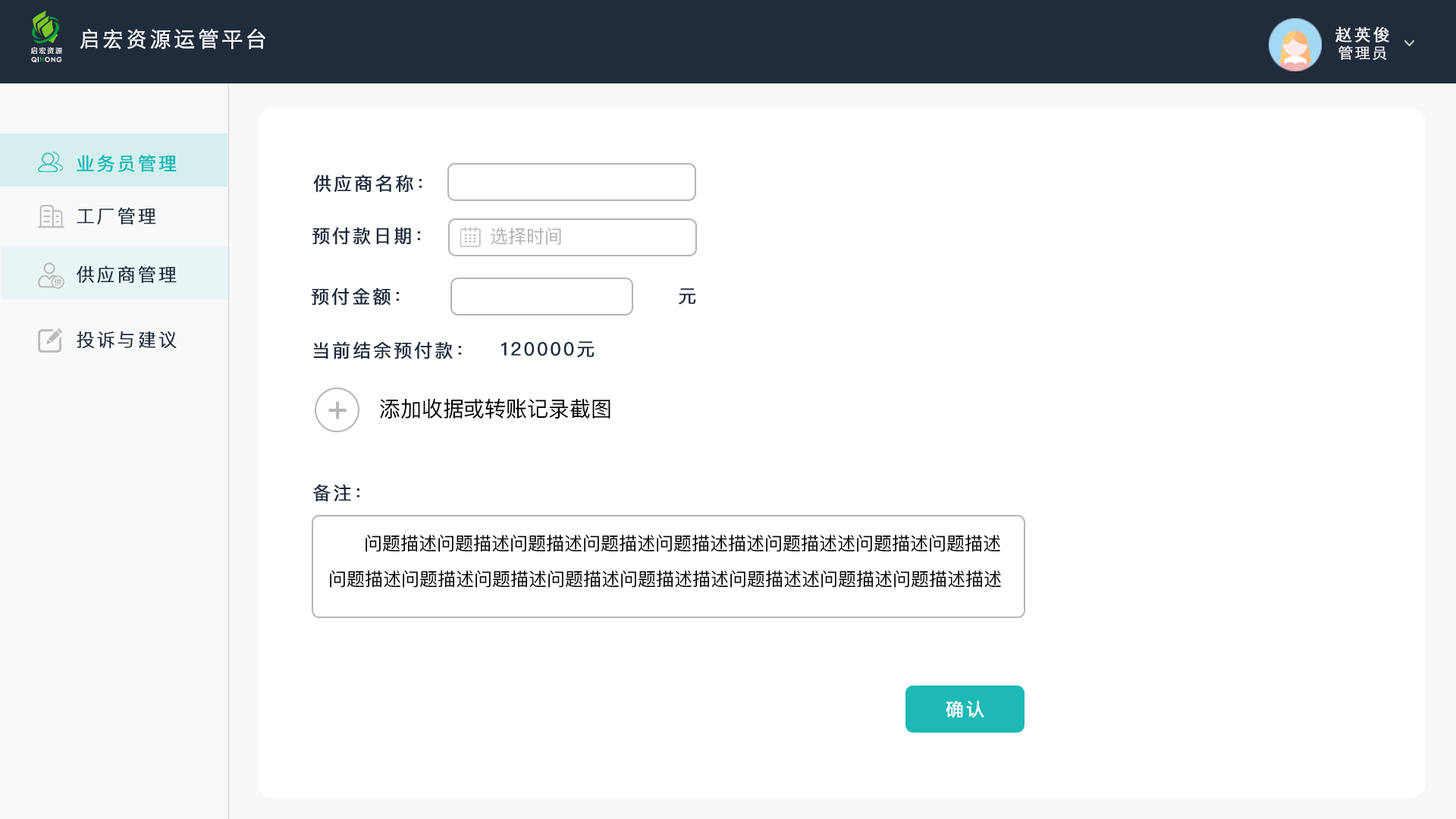
<style>
.page{position:relative;width:1456px;height:819px;background:#ffffff}
.page>*{position:absolute;margin:0}
.t1{font:21.2px "STHeitiSC-Light";letter-spacing:0.1em;color:#ffffff;font-weight:bold}
.t2{font:16.7px "STHeitiSC-Light";letter-spacing:0.1em;color:#ffffff;font-weight:bold}
.t3{font:7px "FZLTZHK--GBK1-0";letter-spacing:0.18em;color:#ffffff}
.t4{font:15.2px "STHeitiSC-Light";letter-spacing:0.1em;color:#ffffff;font-weight:bold}
.t5{font:6.3px "CenturyGothic";letter-spacing:0.1em;color:#ffffff;font-weight:bold}
.t6{font:18.2px "PingFangSC-Regular";letter-spacing:0.1em;color:#1cb9b5;font-weight:bold}
.t7{font:18.2px "PingFangSC-Regular";letter-spacing:0.1em;color:#1e2c3e;font-weight:bold}
.t8{font:18.2px "PingFangSC-Light";letter-spacing:0.1em;color:#1e2c3e;font-weight:bold}
.t9{font:18.2px "PingFangSC-Regular";color:#b5b5b5}
.t10{font:33.6px "PingFangSC-Regular";letter-spacing:0.1em;color:#b5b5b5;font-weight:bold}
.t11{font:21.3px "PingFangSC-Regular";color:#000000}
.t12{font:18.2px "PingFangSC-Regular";color:#000000}
.t13{font:18.2px "PingFangSC-Regular";letter-spacing:0.1em;color:#ffffff;font-weight:bold}
</style>
<div class="page">
<p class="t1" style="left:80px;top:29px;width:185px;height:20px">启宏资源运管平台</p>
<p class="t2" style="left:1335px;top:27px;width:54px;height:15px">赵英俊</p>
<p class="t3" style="left:31px;top:47px;width:31px;height:7px">启宏资源</p>
<p class="t4" style="left:1338px;top:45px;width:49px;height:15px;opacity:0.9">管理员</p>
<p class="t5" style="left:31px;top:57px;width:31px;height:6px">QI  ONG</p>
<p class="t6" style="left:77px;top:155px;width:100px;height:17px">业务员管理</p>
<p class="t7" style="left:313px;top:174px;width:109px;height:19px">供应商名称：</p>
<p class="t8" style="left:77px;top:207px;width:79px;height:17px">工厂管理</p>
<p class="t7" style="left:312px;top:227px;width:109px;height:18px">预付款日期：</p>
<p class="t9" style="left:491px;top:227px;width:70px;height:18px">选择时间</p>
<p class="t8" style="left:77px;top:265px;width:100px;height:18px">供应商管理</p>
<p class="t7" style="left:311px;top:287px;width:89px;height:19px">预付金额：</p>
<p class="t7" style="left:679px;top:288px;width:17px;height:17px">元</p>
<p class="t8" style="left:77px;top:331px;width:100px;height:18px">投诉与建议</p>
<p class="t7" style="left:313px;top:341px;width:149px;height:18px">当前结余预付款：</p>
<p class="t7" style="left:501px;top:341px;width:94px;height:17px">120000元</p>
<p class="t10" style="left:328px;top:401px;width:19px;height:18px">+</p>
<p class="t11" style="left:380px;top:398px;width:230px;height:21px">添加收据或转账记录截图</p>
<p class="t7" style="left:313px;top:484px;width:47px;height:18px">备注：</p>
<p class="t12" style="left:366px;top:535px;width:634px;height:17px">问题描述问题描述问题描述问题描述问题描述描述问题描述述问题描述问题描述</p>
<p class="t12" style="left:330px;top:570px;width:671px;height:18px">问题描述问题描述问题描述问题描述问题描述描述问题描述述问题描述问题描述描述</p>
<p class="t13" style="left:946px;top:701px;width:38px;height:17px">确认</p>
</div>
